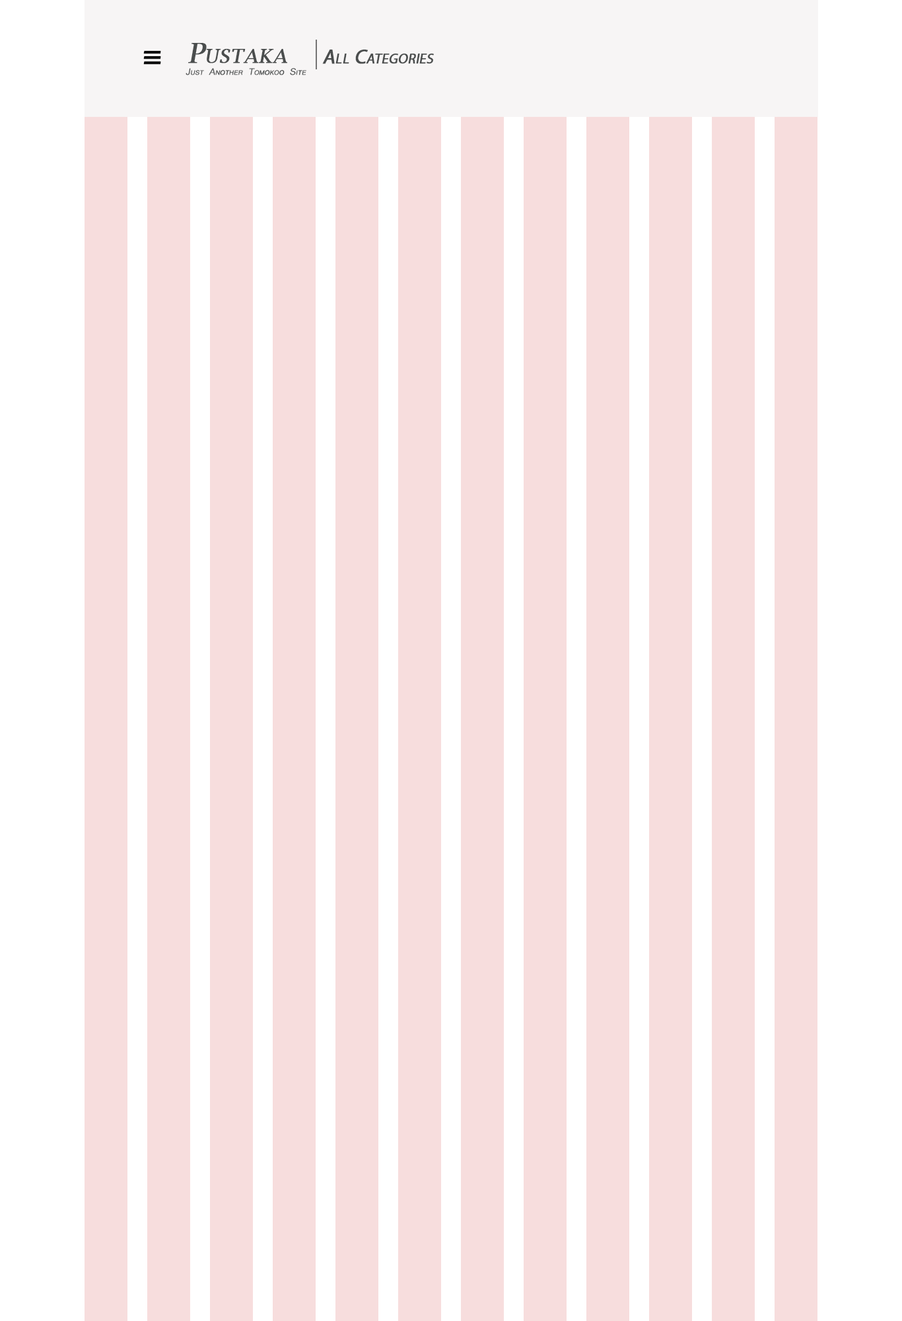
<style>
.page{position:relative;width:902px;height:1321px;background:#f7dddd}
.page>*{position:absolute;margin:0}
.t1{font:51.5px/5.3px "Microsoft-Yi-Baiti";color:#0d0c0c;font-variant:small-caps;font-weight:bold;font-style:italic}
.t2{font:11.7px/11.7px "Microsoft-Yi-Baiti";color:#4a4d4d;font-variant:small-caps;font-weight:bold;font-style:italic}
.t3{font:27.7px/30.5px "LucidaBright";color:#4a4d4d;font-variant:small-caps;font-weight:bold;font-style:italic}
.t4{font:19.8px "MyriadPro-Regular";color:#4a4d4d;font-variant:small-caps;font-weight:bold;font-style:italic}
</style>
<div class="page">
<p class="t1" style="left:143px;top:51px;width:18px;height:14px;text-align:center">-<br>-<br>-</p>
<p class="t2" style="left:186px;top:43px;width:121px;height:32px;text-align:center"><span class="t3">Pustaka<br></span>   Just Another Tomokoo Site</p>
<p class="t4" style="left:322px;top:50px;width:112px;height:14px">All Categories</p>
</div>
